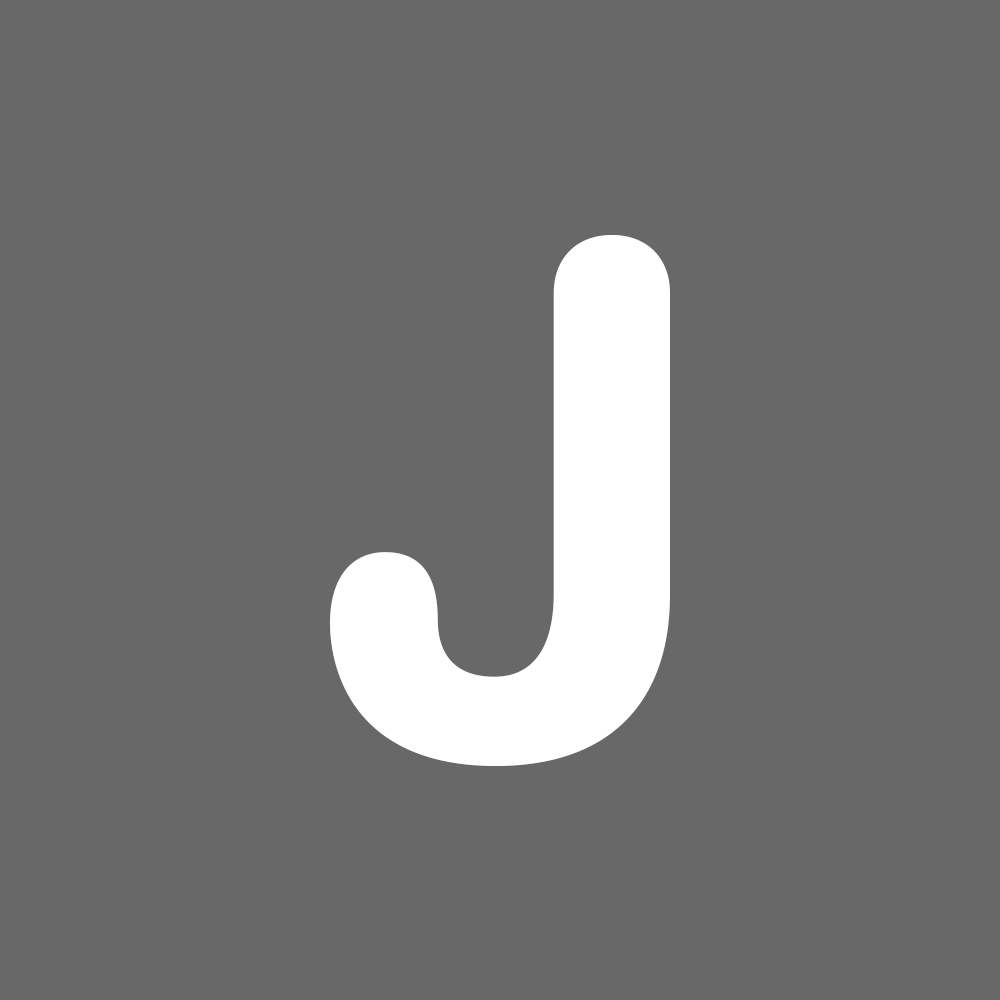
<style>
.page{position:relative;width:1000px;height:1000px;background:#686868}
.page>*{position:absolute;margin:0}
.t1{font:708.3px "HelveticaRounded-Bold";letter-spacing:0.06em;color:#ffffff}
</style>
<div class="page">
<p class="t1" style="left:330px;top:235px;width:340px;height:531px">J</p>
</div>
